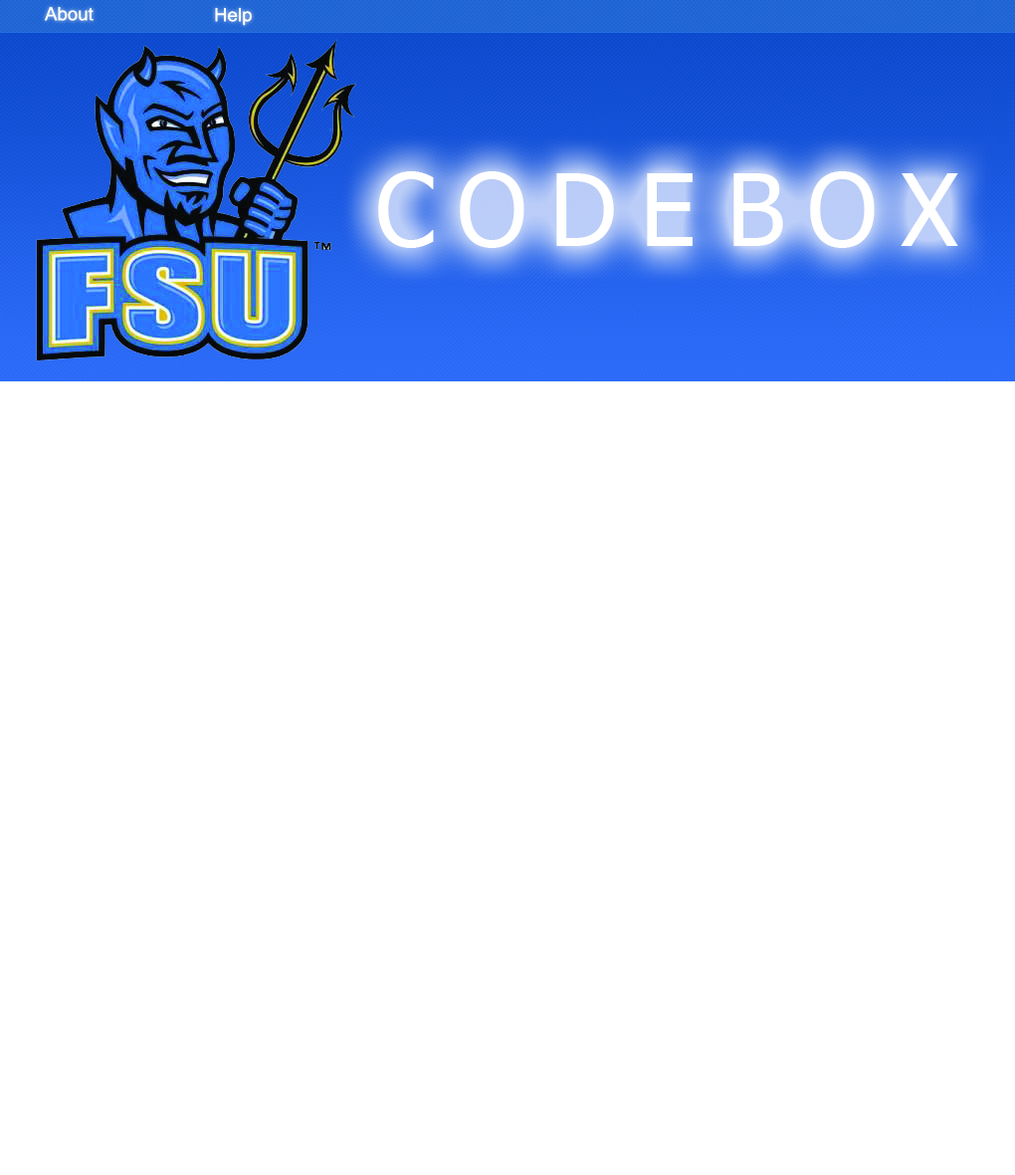
<style>
.page{position:relative;width:1015px;height:1175px;background:#ffffff}
.page>*{position:absolute;margin:0}
.t1{font:17.9px "Kartika";color:#ffffff}
.t2{font:99.5px "Tahoma";color:#ffffff}
</style>
<div class="page">
<p class="t1" style="left:44px;top:7px;width:50px;height:14px">About</p>
<p class="t1" style="left:215px;top:8px;width:37px;height:18px">Help</p>
<p class="t2" style="left:378px;top:171px;width:581px;height:77px">C    O    D    E B    O    X</p>
</div>
